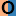
<style>
.page{position:relative;width:16px;height:16px;background:#fcb07e}
.page>*{position:absolute;margin:0}
.t1{font:25px "LucidaConsole";color:#000000}
</style>
<div class="page">
<p class="t1" style="left:1px;top:1px;width:14px;height:13px">o</p>
</div>
